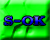
<style>
.page{position:relative;width:50px;height:40px}
.page>*{position:absolute;margin:0}
.t1{font:11.2px "MyungjoXB-HM";scale:1.53 1}
</style>
<div class="page">
<p class="t1" style="left:4px;top:16px;width:42px;height:9px">S-OK</p>
</div>
